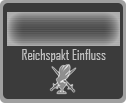
<style>
.page{position:relative;width:126px;height:103px;background:#3b3b3b}
.page>*{position:absolute;margin:0}
.t1{font:14px "AgencyFBCyrillic";color:#c0c0c0}
</style>
<div class="page">
<p class="t1" style="left:22px;top:49px;width:84px;height:13px">Reichspakt Einfluss</p>
</div>
